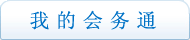
<style>
.page{position:relative;width:190px;height:40px;background:#ffffff}
.page>*{position:absolute;margin:0}
.t1{font:20px "SimSun";letter-spacing:0.34em;color:#0072c6}
</style>
<div class="page">
<p class="t1" style="left:30px;top:10px;width:126px;height:20px">我的会务通</p>
</div>
